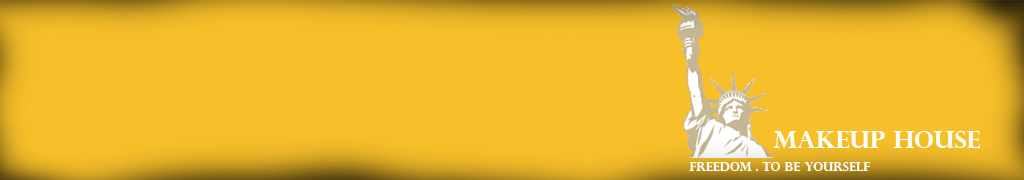
<style>
.page{position:relative;width:1024px;height:180px;background:#f7bf29}
.page>*{position:absolute;margin:0}
.t1{font:24px "PerpetuaTitlingMT-Bold";color:#fefefd}
.t2{font:12px "PerpetuaTitlingMT-Bold";color:#fcfcfb}
</style>
<div class="page">
<p class="t1" style="left:773px;top:131px;width:208px;height:17px">Makeup house</p>
<p class="t2" style="left:689px;top:162px;width:181px;height:9px">Freedom . to be yourself</p>
</div>
